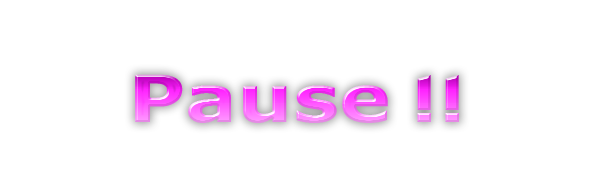
<style>
.page{position:relative;width:599px;height:193px;background:#ffffff}
.page>*{position:absolute;margin:0}
.t1{font:65px "Motken-noqta";scale:1.21 1}
</style>
<div class="page">
<p class="t1" style="left:135px;top:74px;width:324px;height:49px">!! Pause</p>
</div>
